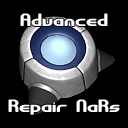
<style>
.page{position:relative;width:128px;height:128px;background:#000000}
.page>*{position:absolute;margin:0}
.t1{font:18px "GravitateBRK";color:#ffffff}
</style>
<div class="page">
<p class="t1" style="left:20px;top:13px;width:88px;height:13px">Advanced</p>
<p class="t1" style="left:8px;top:99px;width:112px;height:16px">Repair NaRs</p>
</div>
